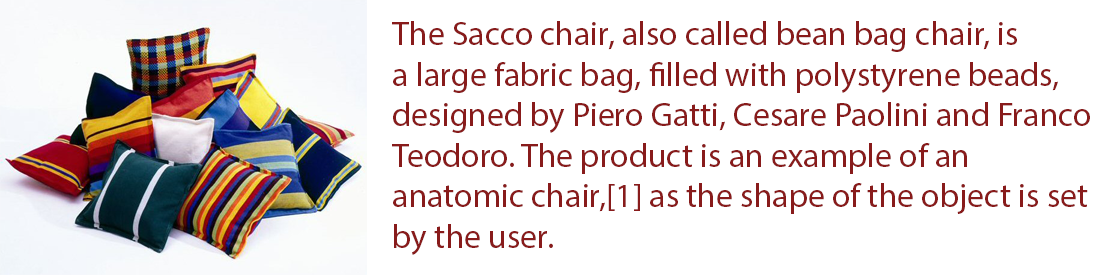
<style>
.page{position:relative;width:1108px;height:276px;background:#ffffff}
.page>*{position:absolute;margin:0}
.t1{font:33.8px "MyriadPro-Regular";color:#881b1b}
</style>
<div class="page">
<p class="t1" style="left:392px;top:21px;width:698px;height:234px">The Sacco chair, also called bean bag chair, is <br>a large fabric bag, filled with polystyrene beads, <br>designed by Piero Gatti, Cesare Paolini and Franco <br>Teodoro. The product is an example of an <br>anatomic chair,[1] as the shape of the object is set <br>by the user.</p>
</div>
